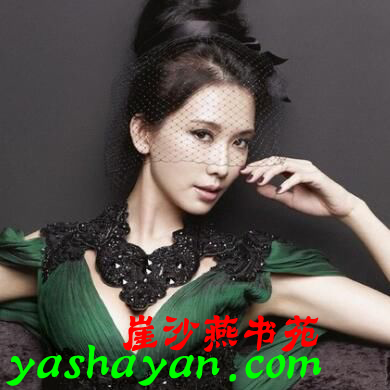
<style>
.page{position:relative;width:390px;height:390px}
.page>*{position:absolute;margin:0}
.t1{font:40px "HYf4gj";color:#ff0000}
.t2{font:48px "HYf4gj";color:#00ff00}
</style>
<div class="page">
<p class="t1" style="left:123px;top:314px;width:196px;height:38px">崖沙燕书苑</p>
<p class="t2" style="left:6px;top:344px;width:316px;height:42px">yashayan.com</p>
</div>
